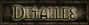
<style>
.page{position:relative;width:89px;height:25px}
.page>*{position:absolute;margin:0}
.t1{font:17px "Morpheus"}
</style>
<div class="page">
<p class="t1" style="left:12px;top:6px;width:64px;height:13px">Detalles</p>
</div>
